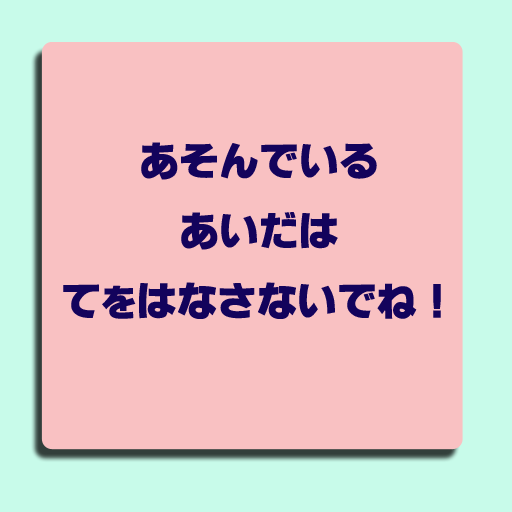
<style>
.page{position:relative;width:512px;height:512px;background:#f9c1c2}
.page>*{position:absolute;margin:0}
.t1{font:40px "ÓÝSVbN";color:#13035c}
.t2{font:36px "ÓÝSVbN";color:#13035c}
</style>
<div class="page">
<p class="t1" style="left:63px;top:142px;width:378px;height:177px;text-align:center">あそんでいる<br>あいだは<br>て<span class="t2">を</span>はなさないでね！</p>
</div>
